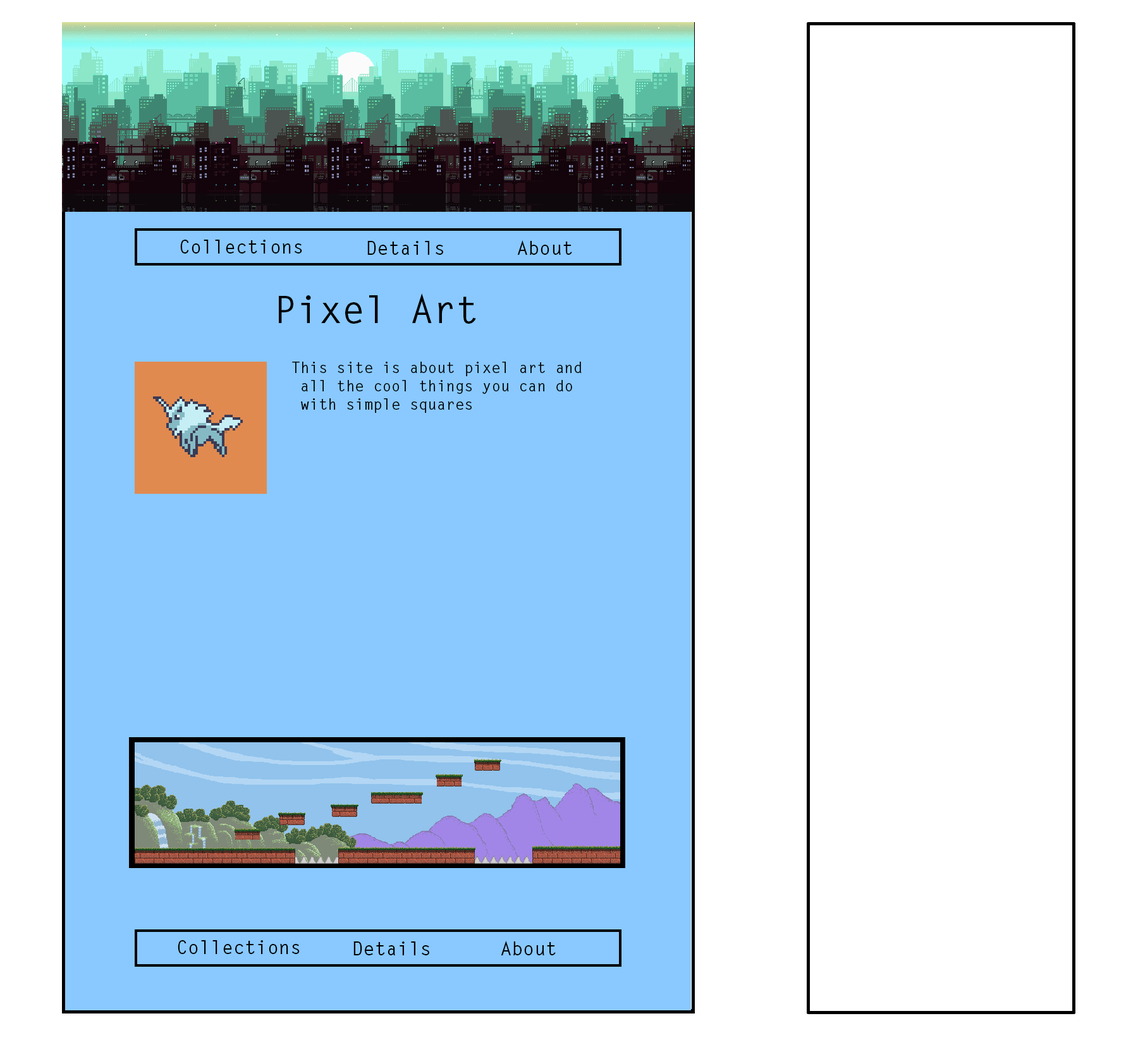
<style>
.page{position:relative;width:1138px;height:1047px;background:#ffffff}
.page>*{position:absolute;margin:0}
.t1{font:19px "LetterGothicStd-Bold";color:#000000}
.t2{font:37.9px "LetterGothicStd-Bold";color:#000000}
.t3{font:15.2px "LetterGothicStd-Bold";color:#000000}
</style>
<div class="page">
<p class="t1" style="left:180px;top:240px;width:122px;height:14px">Collections</p>
<p class="t1" style="left:367px;top:241px;width:76px;height:14px">Details</p>
<p class="t1" style="left:517px;top:240px;width:55px;height:15px">About</p>
<p class="t2" style="left:279px;top:293px;width:197px;height:31px">Pixel Art</p>
<p class="t3" style="left:292px;top:362px;width:290px;height:51px;text-align:right">This site is about pixel art and<br>all the cool things you can do <br>with simple squares</p>
<p class="t1" style="left:178px;top:941px;width:122px;height:13px">Collections</p>
<p class="t1" style="left:354px;top:942px;width:75px;height:14px">Details</p>
<p class="t1" style="left:501px;top:941px;width:55px;height:15px">About</p>
</div>
